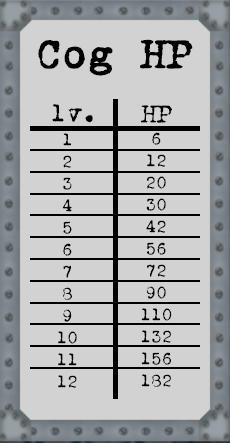
<style>
.page{position:relative;width:230px;height:443px;background:#d2d2d2}
.page>*{position:absolute;margin:0}
.t1{font:42px "VTPortableRemington";color:#000000;font-weight:bold}
.t2{font:26px "VTPortableRemington";color:#000000}
.t3{font:18px/22px "VTPortableRemington";color:#000000}
</style>
<div class="page">
<p class="t1" style="left:38px;top:39px;width:155px;height:37px">Cog HP</p>
<p class="t2" style="left:52px;top:104px;width:41px;height:19px">lv.</p>
<p class="t2" style="left:141px;top:105px;width:31px;height:18px">HP</p>
<p class="t3" style="left:58px;top:133px;width:19px;height:255px;text-align:center">1<br>2<br>3<br>4<br>5<br>6<br>7<br>8<br>9<br>10<br>11<br>12</p>
<p class="t3" style="left:141px;top:132px;width:31px;height:255px;text-align:center">6<br>12<br>20<br>30<br>42<br>56<br>72<br>90<br>110<br>132<br>156<br>182</p>
</div>
